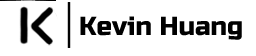
<style>
.page{position:relative;width:256px;height:56px;background:#ffffff}
.page>*{position:absolute;margin:0}
.t1{font:26px "RussoOne-Regular";color:#000000}
</style>
<div class="page">
<p class="t1" style="left:80px;top:16px;width:162px;height:24px">Kevin Huang</p>
</div>
